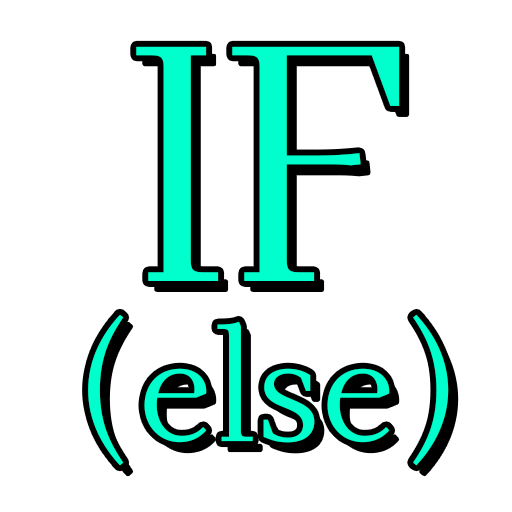
<style>
.page{position:relative;width:512px;height:512px;background:#ffffff}
.page>*{position:absolute;margin:0}
.t1{font:333.5px "DihjautiS-Regular";color:#00ffcc}
.t2{font:159.7px "DihjautiS-Regular";color:#00ffcc}
</style>
<div class="page">
<p class="t1" style="left:136px;top:46px;width:264px;height:235px">IF</p>
<p class="t2" style="left:88px;top:314px;width:361px;height:152px">(else)</p>
</div>
